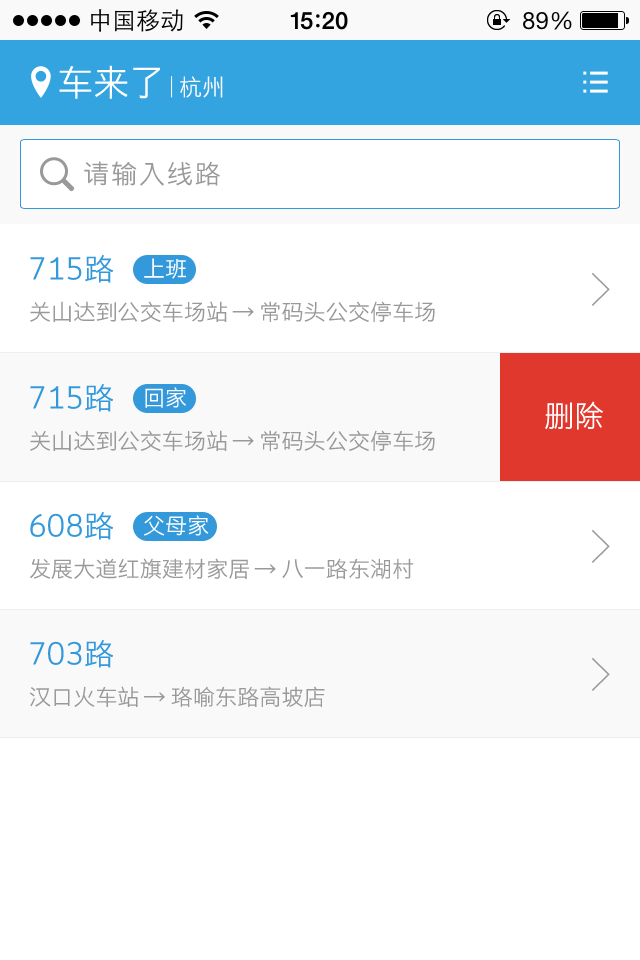
<style>
.page{position:relative;width:640px;height:960px;background:#ffffff}
.page>*{position:absolute;margin:0}
.t1{font:36px "STHeitiSC-Light";color:#ffffff}
.t2{font:23px "STHeitiSC-Light";color:#ffffff}
.t3{font:26px "STHeitiSC-Light";letter-spacing:0.075em;color:#999999}
.t4{font:30px "STHeitiSC-Light";color:#3399db}
.t5{font:22px "STHeitiSC-Light";color:#fefefe}
.t6{font:48px "YouYuan";color:#999999}
.t7{font:22px "STHeitiSC-Light";color:#999999}
.t8{font:30px "STHeitiSC-Light";color:#fefefe}
</style>
<div class="page">
<p class="t1" style="left:59px;top:65px;width:164px;height:34px">车来了<span class="t2">   杭州</span></p>
<p class="t3" style="left:84px;top:161px;width:136px;height:25px">请输入线路</p>
<p class="t4" style="left:30px;top:254px;width:84px;height:29px">715路</p>
<p class="t5" style="left:144px;top:258px;width:42px;height:21px">上班</p>
<p class="t6" style="left:591px;top:272px;width:19px;height:34px">&gt;</p>
<p class="t7" style="left:30px;top:301px;width:405px;height:21px">关山达到公交车场站 → 常码头公交停车场</p>
<p class="t4" style="left:30px;top:383px;width:84px;height:29px">715路</p>
<p class="t5" style="left:145px;top:387px;width:41px;height:21px">回家</p>
<p class="t8" style="left:545px;top:401px;width:58px;height:29px">删除</p>
<p class="t7" style="left:30px;top:430px;width:405px;height:21px">关山达到公交车场站 → 常码头公交停车场</p>
<p class="t4" style="left:30px;top:511px;width:84px;height:29px">608路</p>
<p class="t5" style="left:144px;top:515px;width:65px;height:21px">父母家</p>
<p class="t6" style="left:591px;top:529px;width:19px;height:34px">&gt;</p>
<p class="t7" style="left:30px;top:558px;width:384px;height:21px">发展大道红旗建材家居 → 八一路东湖村</p>
<p class="t4" style="left:30px;top:639px;width:84px;height:29px">703路</p>
<p class="t6" style="left:591px;top:657px;width:19px;height:34px">&gt;</p>
<p class="t7" style="left:30px;top:686px;width:295px;height:21px">汉口火车站 → 珞喻东路高坡店</p>
</div>
